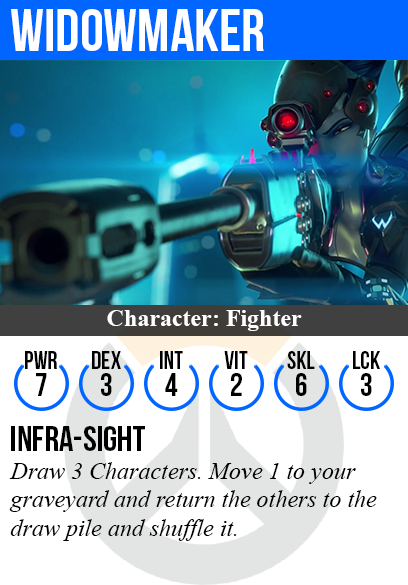
<style>
.page{position:relative;width:408px;height:585px;background:#ffffff}
.page>*{position:absolute;margin:0}
.t1{font:60px "BebasNeue";color:#ffffff}
.t2{font:24px "TimesNewRomanPS-BoldMT";color:#ffffff}
.t3{font:25px "BebasNeue";color:#000000}
.t4{font:32px "BebasNeue";color:#000000}
.t5{font:36px "BebasNeue";color:#000000}
.t6{font:24px "TimesNewRomanPS-ItalicMT";color:#000000}
</style>
<div class="page">
<p class="t1" style="left:11px;top:9px;width:253px;height:42px">widowmaker</p>
<p class="t2" style="left:107px;top:310px;width:195px;height:21px">Character: Fighter</p>
<p class="t3" style="left:25px;top:351px;width:32px;height:18px">PWR</p>
<p class="t3" style="left:92px;top:351px;width:29px;height:18px">dex</p>
<p class="t3" style="left:160px;top:351px;width:23px;height:18px">int</p>
<p class="t3" style="left:224px;top:351px;width:24px;height:18px">vit</p>
<p class="t3" style="left:287px;top:351px;width:28px;height:18px">skl</p>
<p class="t3" style="left:353px;top:351px;width:27px;height:18px">lck</p>
<p class="t4" style="left:36px;top:373px;width:11px;height:23px">7</p>
<p class="t4" style="left:101px;top:373px;width:11px;height:23px">3</p>
<p class="t4" style="left:165px;top:373px;width:13px;height:23px">4</p>
<p class="t4" style="left:231px;top:373px;width:11px;height:23px">2</p>
<p class="t4" style="left:296px;top:373px;width:11px;height:23px">6</p>
<p class="t4" style="left:361px;top:373px;width:11px;height:23px">3</p>
<p class="t5" style="left:11px;top:426px;width:134px;height:25px">infra-sight</p>
<p class="t6" style="left:9px;top:462px;width:368px;height:79px">Draw 3 Characters. Move 1 to your<br>graveyard and return the others to the<br>draw pile and shuffle it.</p>
</div>
